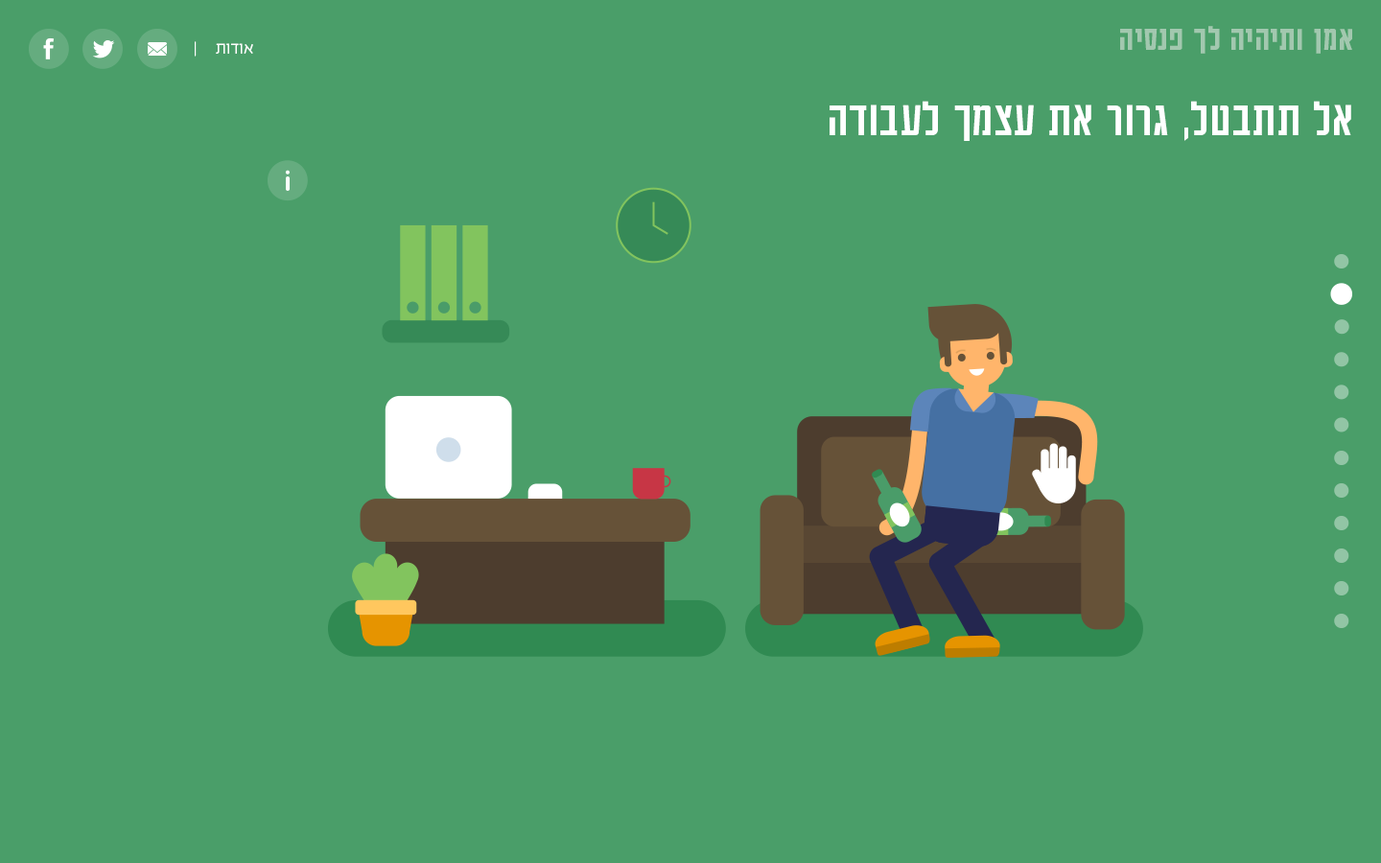
<style>
.page{position:relative;width:1381px;height:863px;background:#4a9e69}
.page>*{position:absolute;margin:0}
.t1{font:37.8px "AdumaFOT-Medium";color:#a2c8af}
.t2{font:19.2px "EzerBlock_OE-Light";color:#ffffff}
.t3{font:54.5px "AdumaFOT-Regular";color:#ffffff}
</style>
<div class="page">
<p class="t1" style="left:1120px;top:26px;width:232px;height:28px">אמן ותיהיה לך פנסיה</p>
<p class="t2" style="left:195px;top:41px;width:58px;height:16px">אודות     |</p>
<p class="t3" style="left:830px;top:101px;width:522px;height:40px">אל תתבטל, גרור את עצמך לעבודה</p>
</div>
